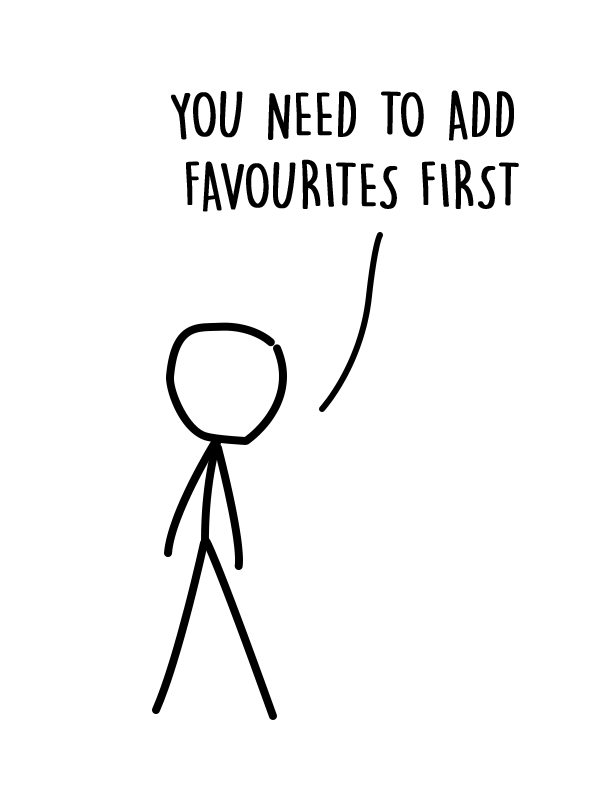
<style>
.page{position:relative;width:600px;height:800px;background:#ffffff}
.page>*{position:absolute;margin:0}
.t1{font:59.9px "DKLemonYellowSun";color:#000000;font-weight:bold}
</style>
<div class="page">
<p class="t1" style="left:171px;top:90px;width:348px;height:122px;text-align:center">YOU NEED TO ADD <br>FAVOURITES FIRST</p>
</div>
